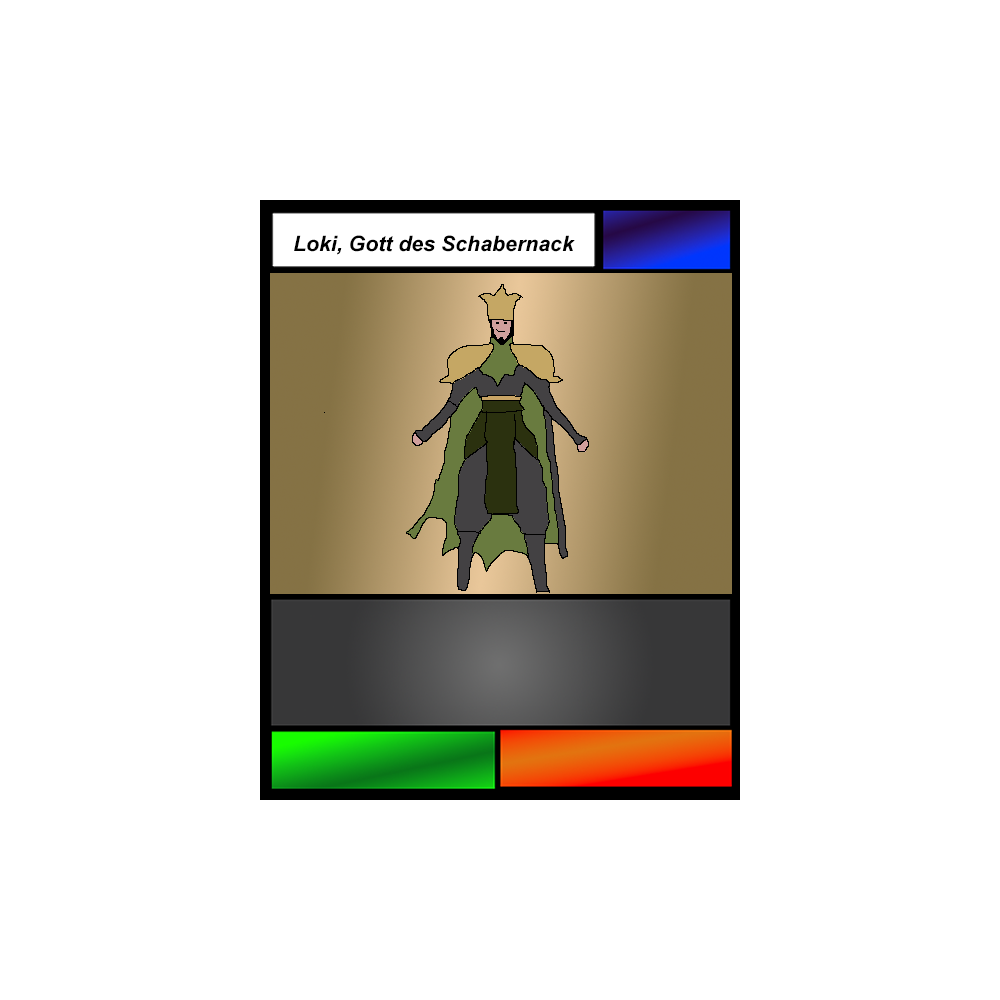
<style>
.page{position:relative;width:1000px;height:1000px;background:#ffffff}
.page>*{position:absolute;margin:0}
.t1{font:21.3px "Arial-BoldItalicMT";color:#000000}
</style>
<div class="page">
<p class="t1" style="left:294px;top:235px;width:281px;height:20px">Loki, Gott des Schabernack</p>
</div>
